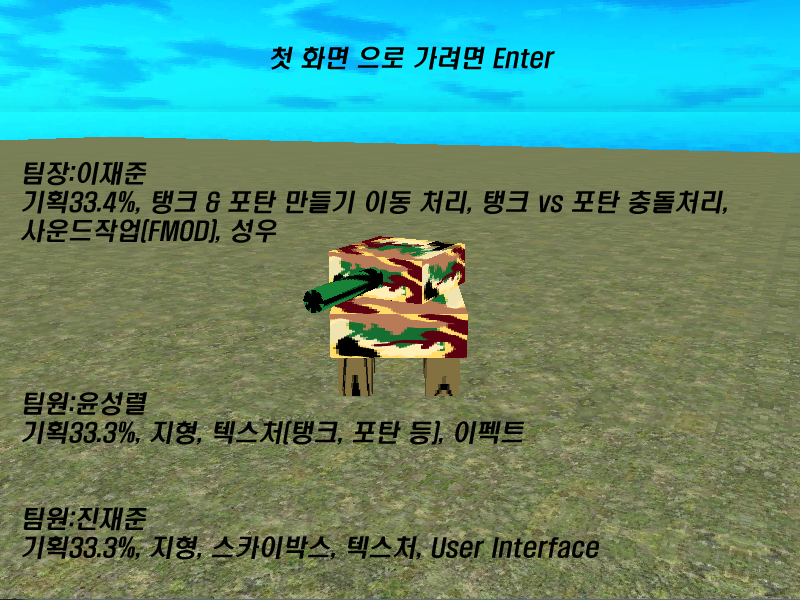
<style>
.page{position:relative;width:800px;height:600px}
.page>*{position:absolute;margin:0}
.t1{font:24px "H2hdrM";color:#010100;font-style:italic}
</style>
<div class="page">
<p class="t1" style="left:21px;top:46px;width:706px;height:514px">첫 화면 으로 가려면 Enter<br><br><br><br>팀장:이재준<br>기획33.4%, 탱크 &amp; 포탄 만들기 이동 처리, 탱크 vs 포탄 충돌처리,<br>사운드작업(FMOD), 성우<br><br><br><br><br><br>팀원:윤성렬<br>기획33.3%, 지형, 텍스처(탱크, 포탄 등), 이펙트<br><br><br>팀원:진재준<br>기획33.3%, 지형, 스카이박스, 텍스처, User Interface</p>
</div>
